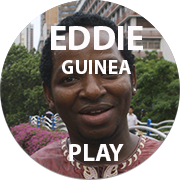
<style>
.page{position:relative;width:180px;height:180px;background:#ffffff}
.page>*{position:absolute;margin:0}
.t1{font:20px "MyriadPro-Bold";color:#fffdfd}
.t2{font:35px "MyriadPro-Bold";color:#fdfbfb}
.t3{font:25px "MyriadPro-Bold";color:#fffdfd}
</style>
<div class="page">
<p class="t1" style="left:51px;top:26px;width:92px;height:48px"><span class="t2">    EDDIE<br></span>          GUINEA</p>
<p class="t3" style="left:69px;top:144px;width:55px;height:17px">PLAY</p>
</div>
